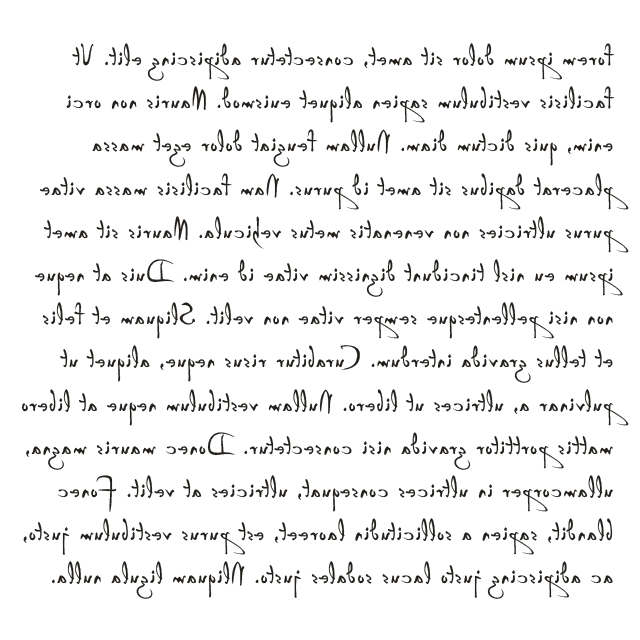
<style>
.page{position:relative;width:640px;height:640px;background:#ffffff}
.page>*{position:absolute;margin:0}
.t1{font:36px "P22DaVinciForward";letter-spacing:0.025em;color:#23201c}
</style>
<div class="page">
<p class="t1" style="left:21px;top:43px;width:608px;height:556px;rotate:180deg">forem ipsum dolor sit amet, consectetur adipiscing elit. Ut facilisis vestibulum sapien aliquet euismod. Mauris non orci enim, quis dictum diam. Nullam feugiat dolor eget massa placerat dapibus sit amet id purus. Nam facilisis massa vitae purus ultricies non venenatis metus vehicula. Mauris sit amet ipsum eu nisl tincidunt dignissim vitae id enim. Duis at neque non nisi pellentesque semper vitae non velit. Sliquam et felis et tellus gravida interdum. Curabitur risus neque, aliquet ut pulvinar a, ultrices ut libero. Nullam vestibulum neque at libero mattis porttitor gravida nisi consectetur. Donec mauris magna, ullamcorper in ultrices consequat, ultricies at velit. Fonec blandit, sapien a sollicitudin laoreet, est purus vestibulum justo, ac adipiscing justo lacus sodales justo. Nliquam ligula nulla.</p>
</div>
